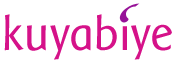
<style>
.page{position:relative;width:178px;height:60px;background:#ffffff}
.page>*{position:absolute;margin:0}
.t1{font:48.9px "BaarSophia";color:#d51289}
.t2{font:48.9px "MyriadPro-Regular";color:#d51289}
</style>
<div class="page">
<p class="t1" style="left:4px;top:14px;width:168px;height:46px">kuyab<span class="t2">ı</span>ye</p>
</div>
